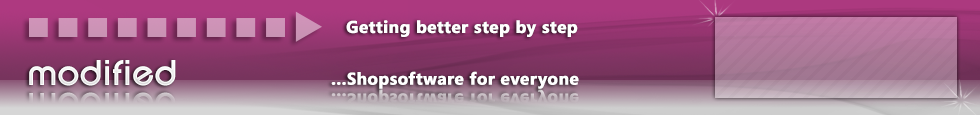
<style>
.page{position:relative;width:980px;height:115px}
.page>*{position:absolute;margin:0}
.t1{font:17px "Segoe-Bold";letter-spacing:0.01em;color:#ffffff;font-weight:bold}
.t2{font:37px "SFNewRepublic-Bold";color:#ffffff}
</style>
<div class="page">
<p class="t1" style="left:346px;top:20px;width:232px;height:17px">Getting better step by step</p>
<p class="t2" style="left:29px;top:60px;width:147px;height:26px">modified</p>
<p class="t1" style="left:331px;top:71px;width:248px;height:18px">...Shopsoftware for everyone</p>
</div>
